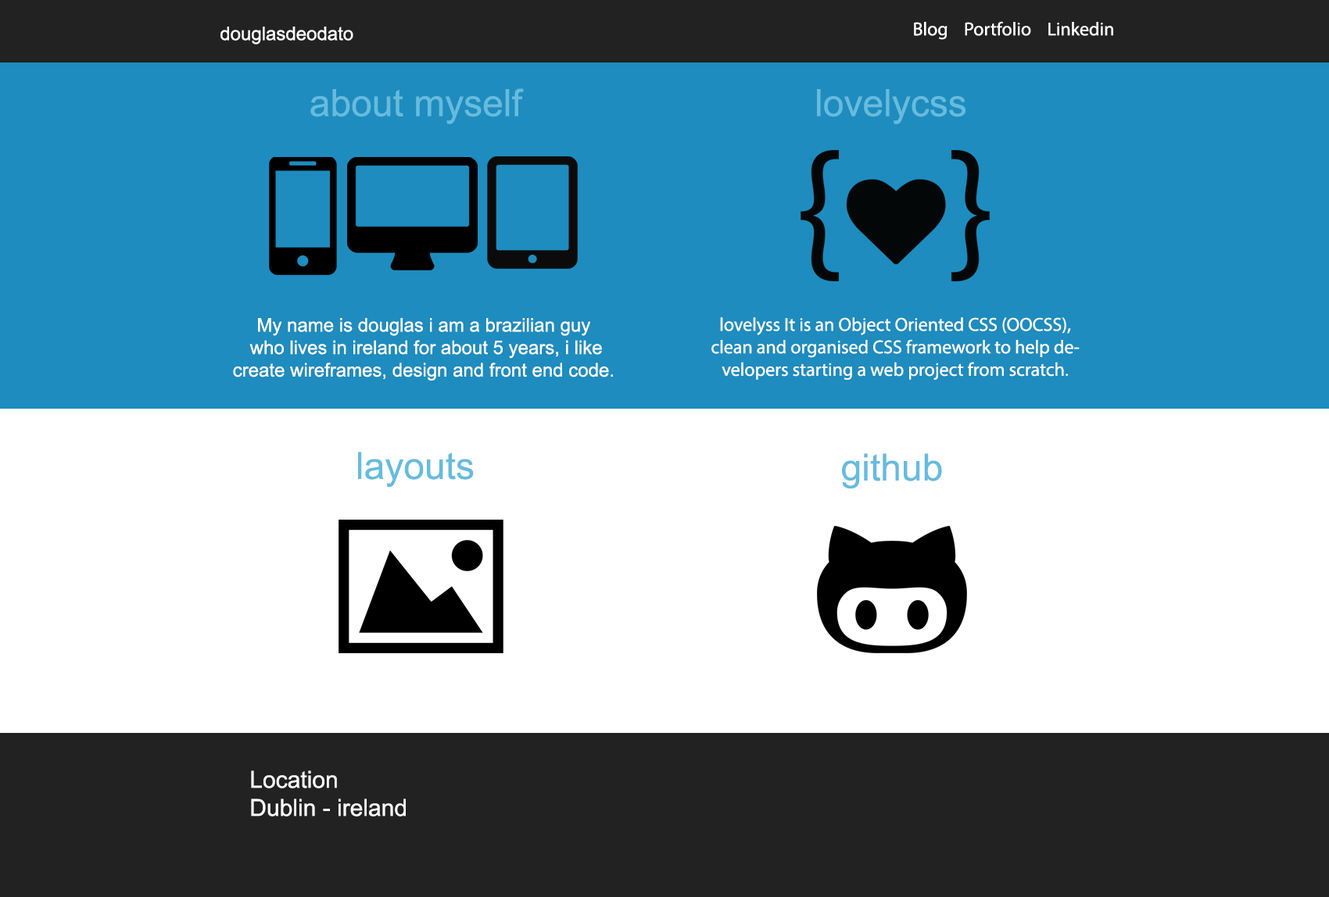
<style>
.page{position:relative;width:1329px;height:897px;background:#ffffff}
.page>*{position:absolute;margin:0}
.t1{font:18.8px "ArialMT";color:#ffffff}
.t2{font:18.8px "MyriadPro-Regular";color:#ffffff}
.t3{font:37.5px "ArialMT";color:#67bbdd}
.t4{font:37.5px "ArialMT";color:#c60751}
.t5{font:23.4px "ArialMT";color:#ffffff}
</style>
<div class="page">
<p class="t1" style="left:220px;top:27px;width:133px;height:18px">douglasdeodato</p>
<p class="t2" style="left:914px;top:21px;width:199px;height:19px">Blog    Portfolio    Linkedin</p>
<p class="t3" style="left:310px;top:88px;width:214px;height:36px">about myself</p>
<p class="t3" style="left:817px;top:89px;width:149px;height:35px"><span class="t4"> </span>lovelycss</p>
<p class="t2" style="left:711px;top:317px;width:368px;height:63px;text-align:center">lovelyss It is an Object Oriented CSS (OOCSS), clean and organised CSS framework to help developers starting a web project from scratch.</p>
<p class="t1" style="left:233px;top:318px;width:380px;height:63px;text-align:center">My name is douglas i am a brazilian guy <br>who lives in ireland for about 5 years, i like<br>create wireframes, design and front end code.</p>
<p class="t3" style="left:358px;top:452px;width:116px;height:36px">layouts</p>
<p class="t3" style="left:842px;top:453px;width:100px;height:36px">github</p>
<p class="t5" style="left:251px;top:771px;width:155px;height:46px">Location<br>Dublin - ireland</p>
</div>
